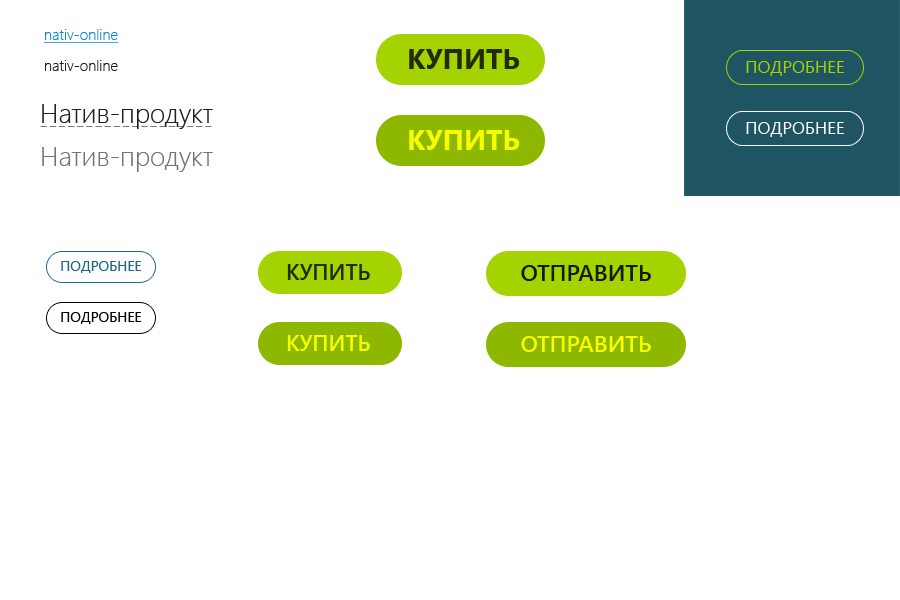
<style>
.page{position:relative;width:900px;height:600px;background:#ffffff}
.page>*{position:absolute;margin:0}
.t1{font:15px "SegoeUI-Light";color:#0f8ac7;text-decoration:underline}
.t2{font:28px "SegoeUI-Bold";color:#232c01;text-transform:uppercase}
.t3{font:15px "SegoeUI-Light";color:#202020}
.t4{font:17.3px "SegoeUI";color:#a4d300;text-transform:uppercase}
.t5{font:27px "SegoeUI-Light";color:#202020}
.t6{font:17.3px "SegoeUI";color:#ffffff;text-transform:uppercase}
.t7{font:28px "SegoeUI-Bold";color:#f6ff00;text-transform:uppercase}
.t8{font:27px "SegoeUI-Light";color:#747473}
.t9{font:14.1px "SegoeUI";color:#1c6986;text-transform:uppercase}
.t10{font:22px "SegoeUI-SemiBold";color:#232c01;text-transform:uppercase}
.t11{font:23px "SegoeUI-SemiBold";color:#141a00;text-transform:uppercase}
.t12{font:14.1px "SegoeUI";color:#000000;text-transform:uppercase}
.t13{font:22px "SegoeUI-SemiBold";color:#f6ff00;text-transform:uppercase}
.t14{font:23px "SegoeUI-SemiBold";color:#f6ff00;text-transform:uppercase}
</style>
<div class="page">
<p class="t1" style="left:44px;top:29px;width:75px;height:14px">nativ-online</p>
<p class="t2" style="left:409px;top:49px;width:111px;height:20px">купить</p>
<p class="t3" style="left:45px;top:60px;width:73px;height:11px">nativ-online</p>
<p class="t4" style="left:746px;top:61px;width:98px;height:15px">подробнее</p>
<p class="t5" style="left:42px;top:104px;width:171px;height:25px">Натив-продукт</p>
<p class="t6" style="left:746px;top:122px;width:98px;height:15px">подробнее</p>
<p class="t7" style="left:409px;top:130px;width:111px;height:20px">купить</p>
<p class="t8" style="left:42px;top:147px;width:171px;height:25px">Натив-продукт</p>
<p class="t9" style="left:61px;top:261px;width:81px;height:12px">подробнее</p>
<p class="t10" style="left:287px;top:264px;width:83px;height:16px">купить</p>
<p class="t11" style="left:521px;top:265px;width:130px;height:16px">отправить</p>
<p class="t12" style="left:61px;top:312px;width:81px;height:12px">подробнее</p>
<p class="t13" style="left:287px;top:335px;width:83px;height:16px">купить</p>
<p class="t14" style="left:521px;top:336px;width:130px;height:16px">отправить</p>
</div>
